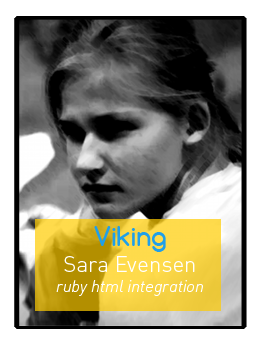
<style>
.page{position:relative;width:263px;height:345px;background:#ffffff}
.page>*{position:absolute;margin:0}
.t1{font:16.7px "DIN-LightItalicAlt";color:#ffffff}
.t2{font:25px "Comfortaa-Bold";color:#20a0ea}
.t3{font:22.2px "DIN-Light";color:#ffffff}
</style>
<div class="page">
<p class="t1" style="left:56px;top:226px;width:147px;height:70px;text-align:center"><span class="t2">Viking<br></span><span class="t3">Sara Evensen<br></span>ruby html integration</p>
</div>
